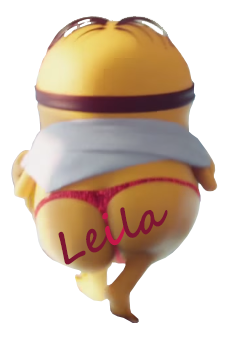
<style>
.page{position:relative;width:229px;height:343px;background:#ffffff}
.page>*{position:absolute;margin:0}
.t1{font:44px "SegoeScript-Bold";color:#7e1532;scale:0.91 1}
.t2{font:44px "SegoeScript-Bold";color:#c51748;scale:0.91 1}
</style>
<div class="page">
<p class="t1" style="left:58px;top:207px;width:110px;height:58px;rotate:-20deg">Le<span class="t2">i</span>la</p>
</div>
